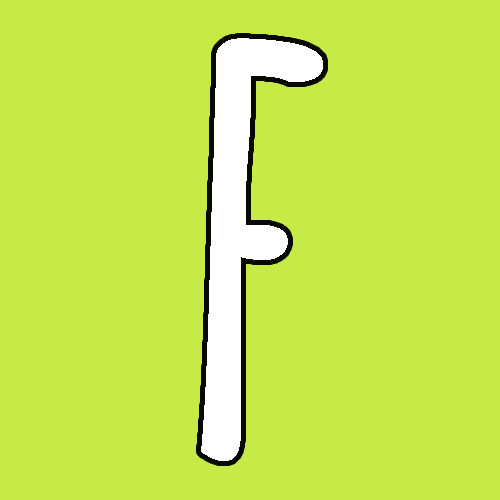
<style>
.page{position:relative;width:500px;height:500px;background:#c7ea46}
.page>*{position:absolute;margin:0}
.t1{font:625px "AmaticSC-Bold";color:#ffffff}
</style>
<div class="page">
<p class="t1" style="left:201px;top:38px;width:122px;height:423px">f</p>
</div>
